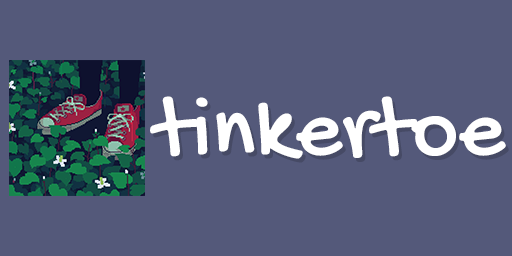
<style>
.page{position:relative;width:512px;height:256px;background:#54597a}
.page>*{position:absolute;margin:0}
.t1{font:90.7px "GochiHand-Regular";color:#ffffff}
</style>
<div class="page">
<p class="t1" style="left:150px;top:96px;width:356px;height:63px">tinkertoe</p>
</div>
